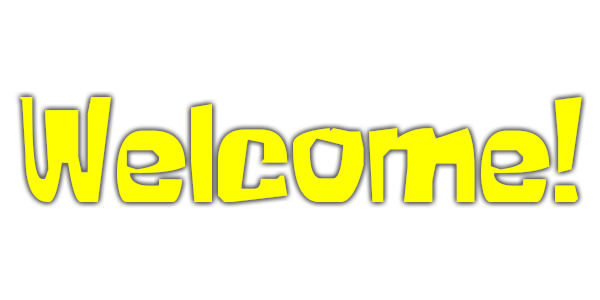
<style>
.page{position:relative;width:600px;height:300px;background:#ffffff}
.page>*{position:absolute;margin:0}
.t1{font:140px "KrabbyPatty";color:#ffff01}
</style>
<div class="page">
<p class="t1" style="left:19px;top:97px;width:563px;height:105px">Welcome!</p>
</div>
